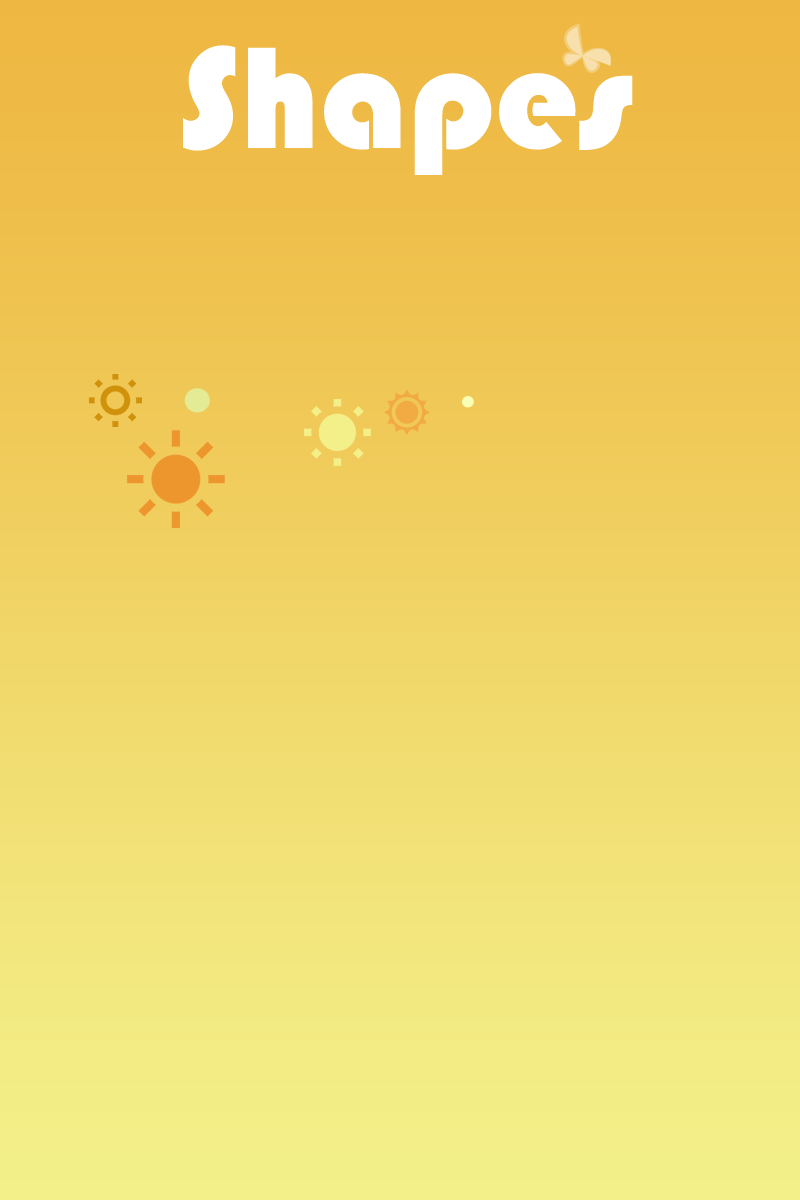
<style>
.page{position:relative;width:800px;height:1200px}
.page>*{position:absolute;margin:0}
.t1{font:150px "Bauhaus93";color:#ffffff}
</style>
<div class="page">
<p class="t1" style="left:183px;top:45px;width:450px;height:130px">Shapes</p>
</div>
